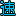
<style>
.page{position:relative;width:16px;height:16px;background:#00bfff}
.page>*{position:absolute;margin:0}
.t1{font:15px "Zpix";letter-spacing:0.02em;color:#00bfff}
</style>
<div class="page">
<p class="t1" style="left:1px;top:1px;width:14px;height:14px">速</p>
</div>
